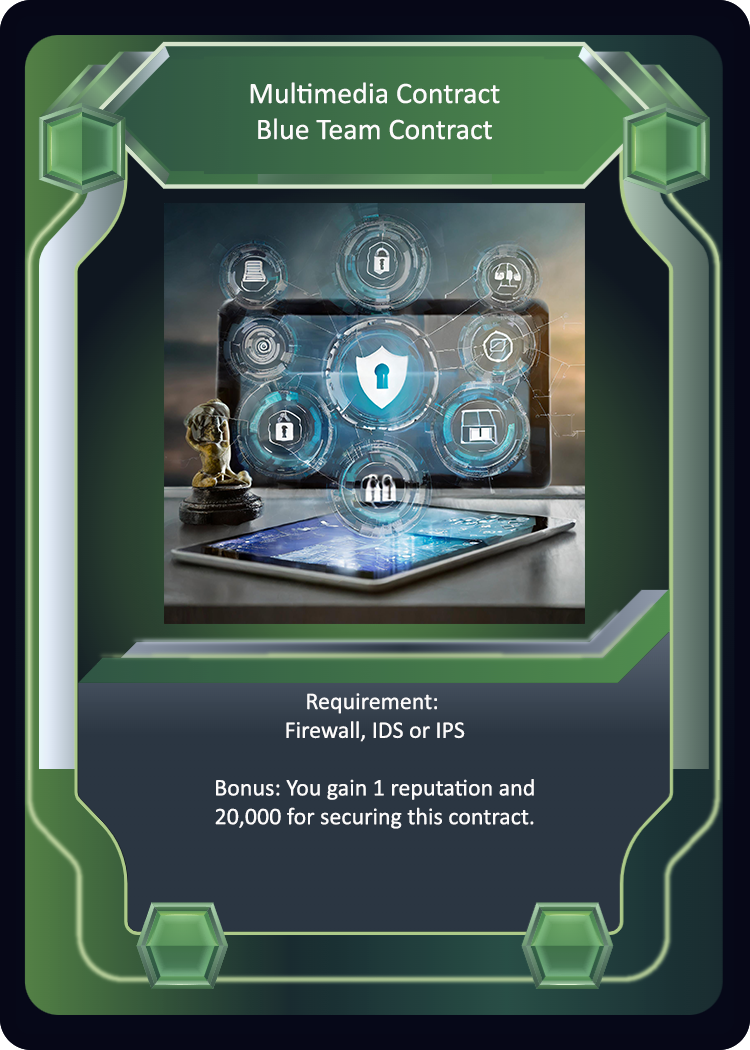
<style>
.page{position:relative;width:750px;height:1050px}
.page>*{position:absolute;margin:0}
.t1{font:30px "Calibri";color:#fcfbfb}
.t2{font:24px "Calibri";color:#fcfbfb}
</style>
<div class="page">
<p class="t1" style="left:250px;top:82px;width:250px;height:58px;text-align:center">Multimedia Contract<br>Blue Team Contract</p>
<p class="t2" style="left:215px;top:693px;width:319px;height:136px;text-align:center">Requirement: <br>Firewall, IDS or IPS<br><br>Bonus: You gain 1 reputation and<br>20,000 for securing this contract.</p>
</div>
